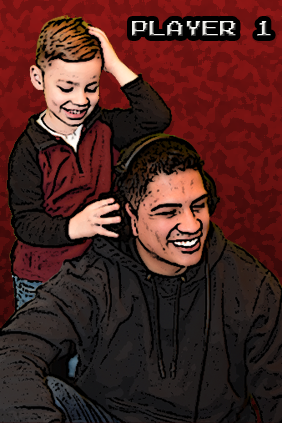
<style>
.page{position:relative;width:282px;height:423px}
.page>*{position:absolute;margin:0}
.t1{font:18px "ArcadeNormal"}
</style>
<div class="page">
<p class="t1" style="left:132px;top:21px;width:139px;height:15px">Player 1</p>
</div>
